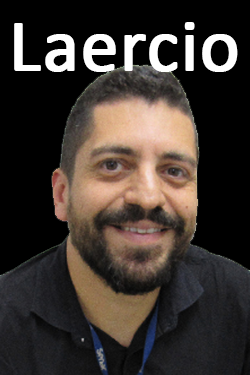
<style>
.page{position:relative;width:250px;height:375px;background:#000000}
.page>*{position:absolute;margin:0}
.t1{font:75px "Calibri";color:#ffffff;font-weight:bold}
</style>
<div class="page">
<p class="t1" style="left:14px;top:22px;width:224px;height:50px">Laercio</p>
</div>
